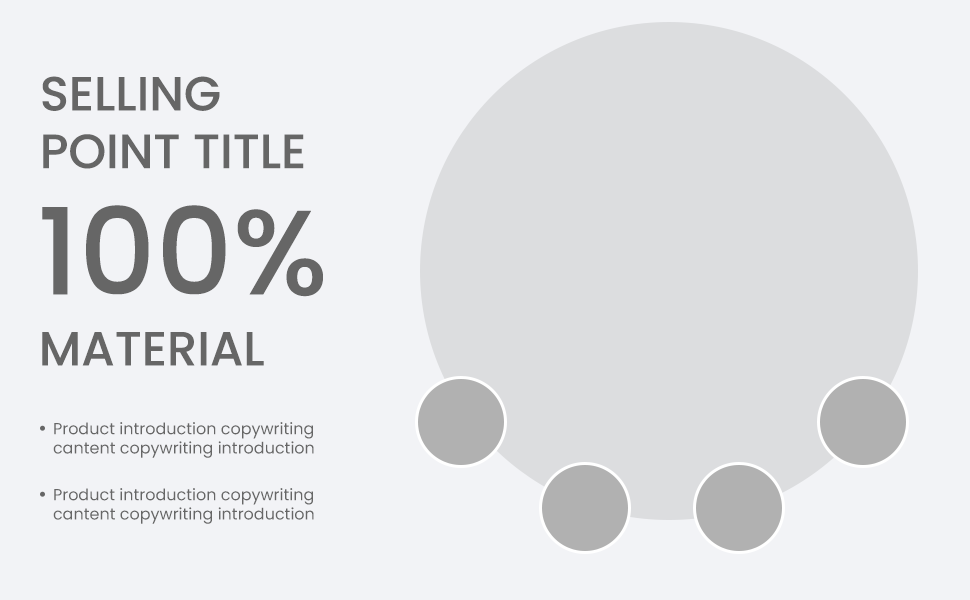
<style>
.page{position:relative;width:970px;height:600px;background:#f2f3f6}
.page>*{position:absolute;margin:0}
.t1{font:48px "Poppins-Medium";color:#666666}
.t2{font:120px "Poppins-Medium";color:#666666}
.t3{font:16px "Poppins-Regular";color:#666666}
</style>
<div class="page">
<p class="t1" style="left:42px;top:76px;width:262px;height:93px">SELLING<br>POINT TITLE</p>
<p class="t2" style="left:42px;top:205px;width:281px;height:92px">100%</p>
<p class="t1" style="left:42px;top:332px;width:222px;height:34px">MATERIAL</p>
<p class="t3" style="left:53px;top:422px;width:261px;height:36px">Product introduction copywriting<br>cantent copywriting introduction</p>
<p class="t3" style="left:53px;top:488px;width:261px;height:36px">Product introduction copywriting<br>cantent copywriting introduction</p>
</div>
